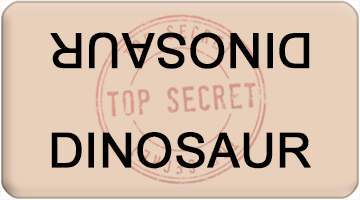
<style>
.page{position:relative;width:360px;height:200px;background:#e8d0bb}
.page>*{position:absolute;margin:0}
.t1{font:48px "ArialMT";color:#000000;font-weight:bold}
</style>
<div class="page">
<p class="t1" style="left:50px;top:32px;width:260px;height:37px;rotate:180deg">DINOSAUR</p>
<p class="t1" style="left:51px;top:132px;width:260px;height:37px">DINOSAUR</p>
</div>
